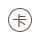
<style>
.page{position:relative;width:40px;height:40px;background:#ffffff}
.page>*{position:absolute;margin:0}
.t1{font:14px "MicrosoftYaHei";color:#675342}
</style>
<div class="page">
<p class="t1" style="left:12px;top:14px;width:15px;height:13px">卡</p>
</div>
